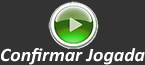
<style>
.page{position:relative;width:145px;height:65px;background:#333333}
.page>*{position:absolute;margin:0}
.t1{font:19px "Calibri-BoldItalic";color:#ffffff;scale:1.04 1}
</style>
<div class="page">
<p class="t1" style="left:1px;top:48px;width:144px;height:17px">Confirmar Jogada</p>
</div>
